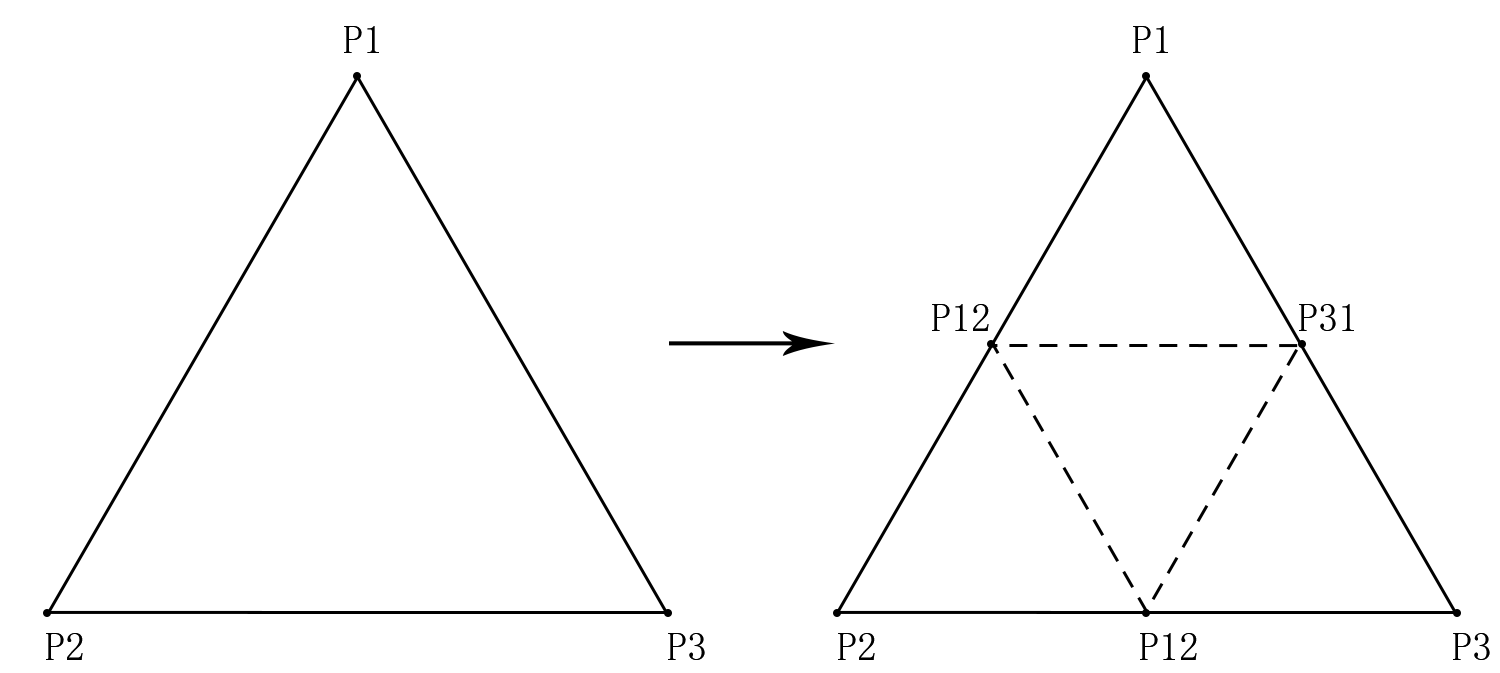
<style>
.page{position:relative;width:1500px;height:673px;background:#ffffff}
.page>*{position:absolute;margin:0}
.t1{font:40px "SimSun";color:#000000}
</style>
<div class="page">
<p class="t1" style="left:344px;top:26px;width:35px;height:27px">P1</p>
<p class="t1" style="left:1133px;top:26px;width:35px;height:27px">P1</p>
<p class="t1" style="left:932px;top:304px;width:57px;height:27px">P12</p>
<p class="t1" style="left:1299px;top:304px;width:55px;height:27px">P31</p>
<p class="t1" style="left:46px;top:633px;width:37px;height:27px">P2</p>
<p class="t1" style="left:668px;top:633px;width:37px;height:27px">P3</p>
<p class="t1" style="left:838px;top:633px;width:37px;height:27px">P2</p>
<p class="t1" style="left:1140px;top:633px;width:57px;height:27px">P12</p>
<p class="t1" style="left:1453px;top:633px;width:37px;height:27px">P3</p>
</div>
